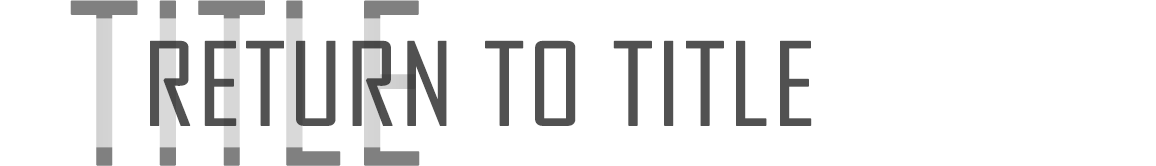
<style>
.page{position:relative;width:1156px;height:166px;background:#ffffff}
.page>*{position:absolute;margin:0}
.t1{font:214px "AgencyFB-Reg";text-transform:uppercase;font-weight:bold}
.t2{font:110px "AgencyFB-Reg";color:#515151;text-transform:uppercase;font-weight:bold;scale:1.1 1}
</style>
<div class="page">
<p class="t1" style="left:70px;top:0px;width:350px;height:166px">title</p>
<p class="t2" style="left:150px;top:40px;width:662px;height:86px">return to title</p>
</div>
